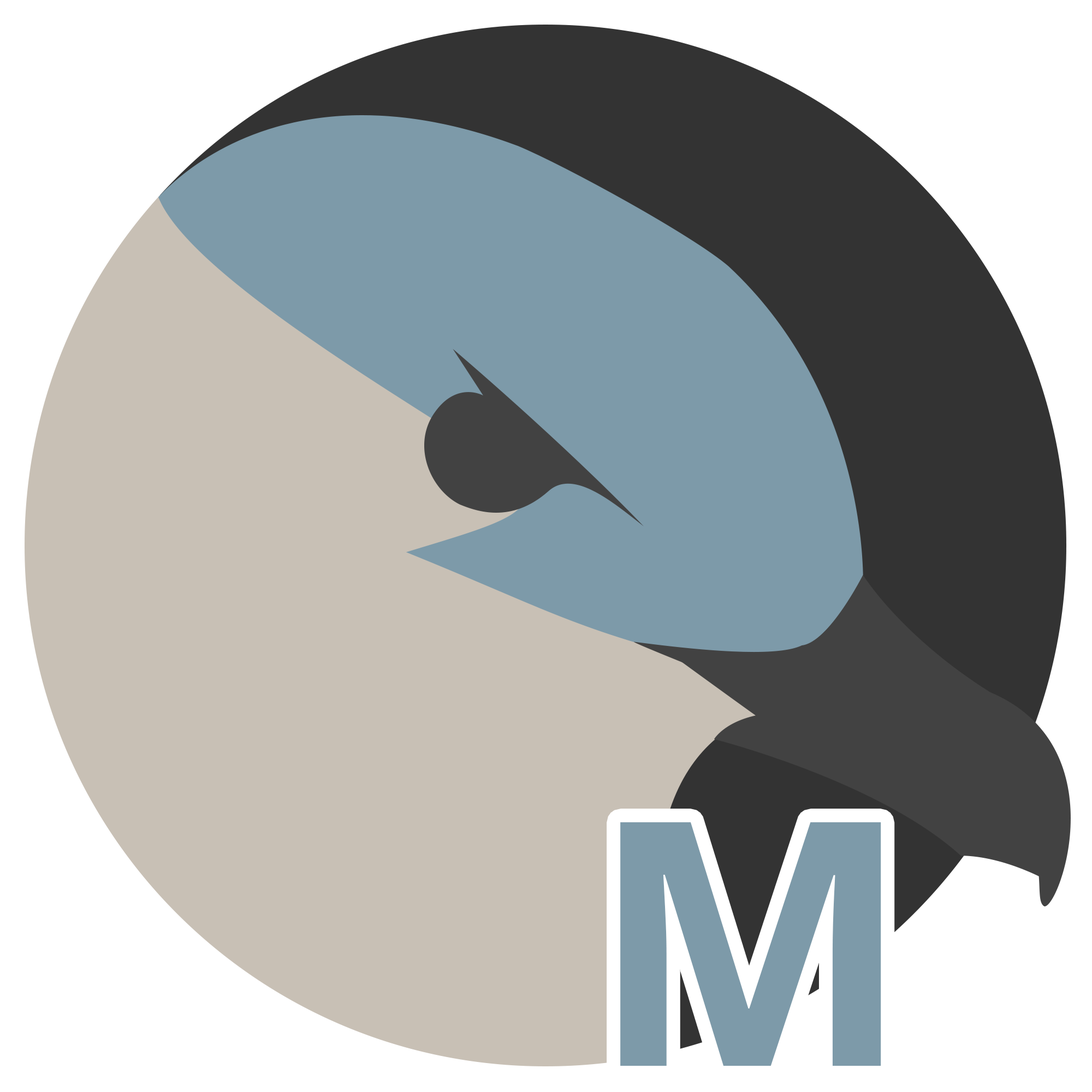
<style>
.page{position:relative;width:1092px;height:1092px;background:#c8c0b5}
.page>*{position:absolute;margin:0}
.t1{font:341.2px "OpenSansRoman-Bold";letter-spacing:-0.027em;color:#7d9aa9;font-weight:bold}
</style>
<div class="page">
<p class="t1" style="left:620px;top:822px;width:261px;height:244px">M</p>
</div>
